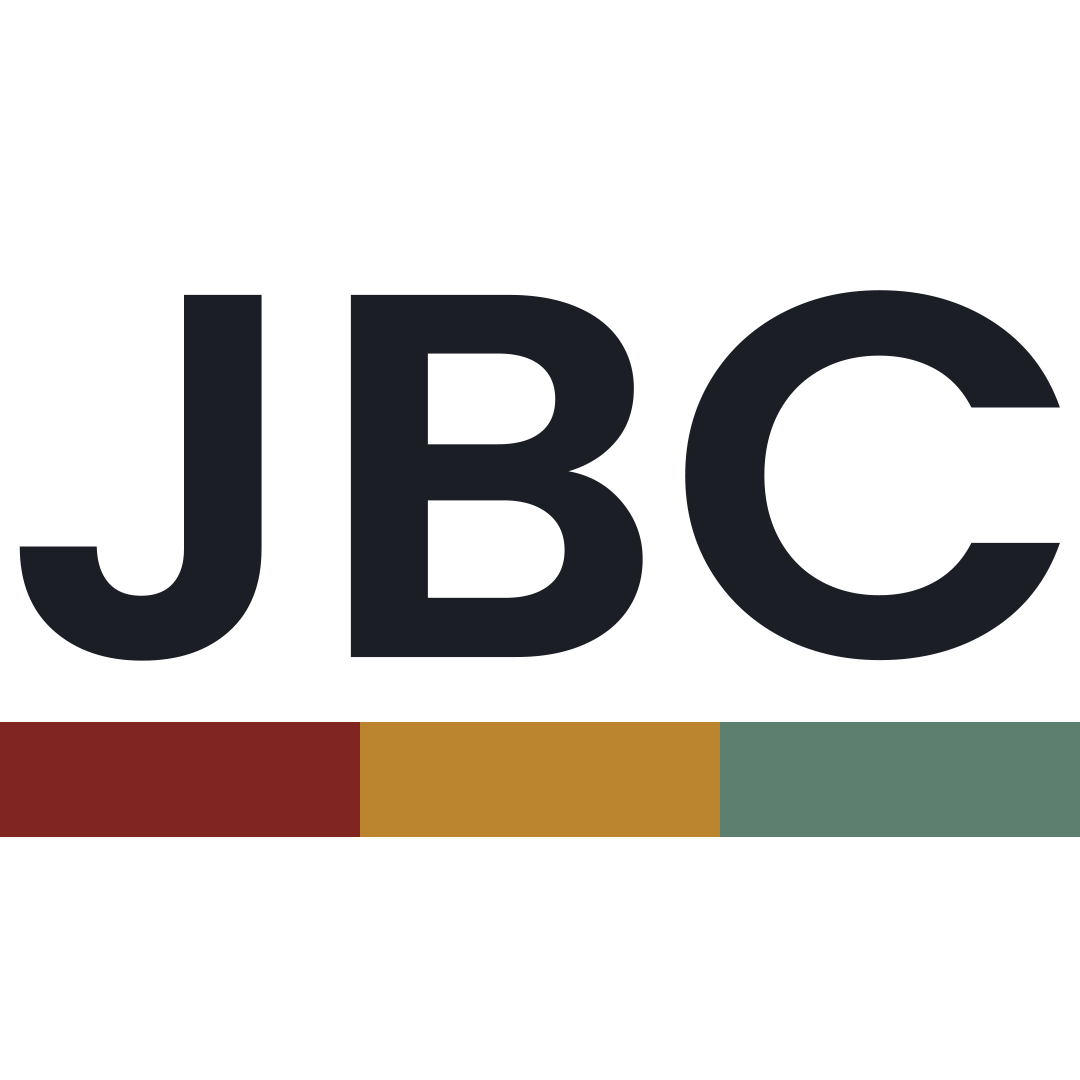
<style>
.page{position:relative;width:1080px;height:1080px;background:#ffffff}
.page>*{position:absolute;margin:0}
.t1{font:518.8px "Poppins-SemiBold";color:#1c1e25;text-transform:uppercase;scale:1.06 1}
</style>
<div class="page">
<p class="t1" style="left:19px;top:290px;width:1041px;height:371px">JBC</p>
</div>
